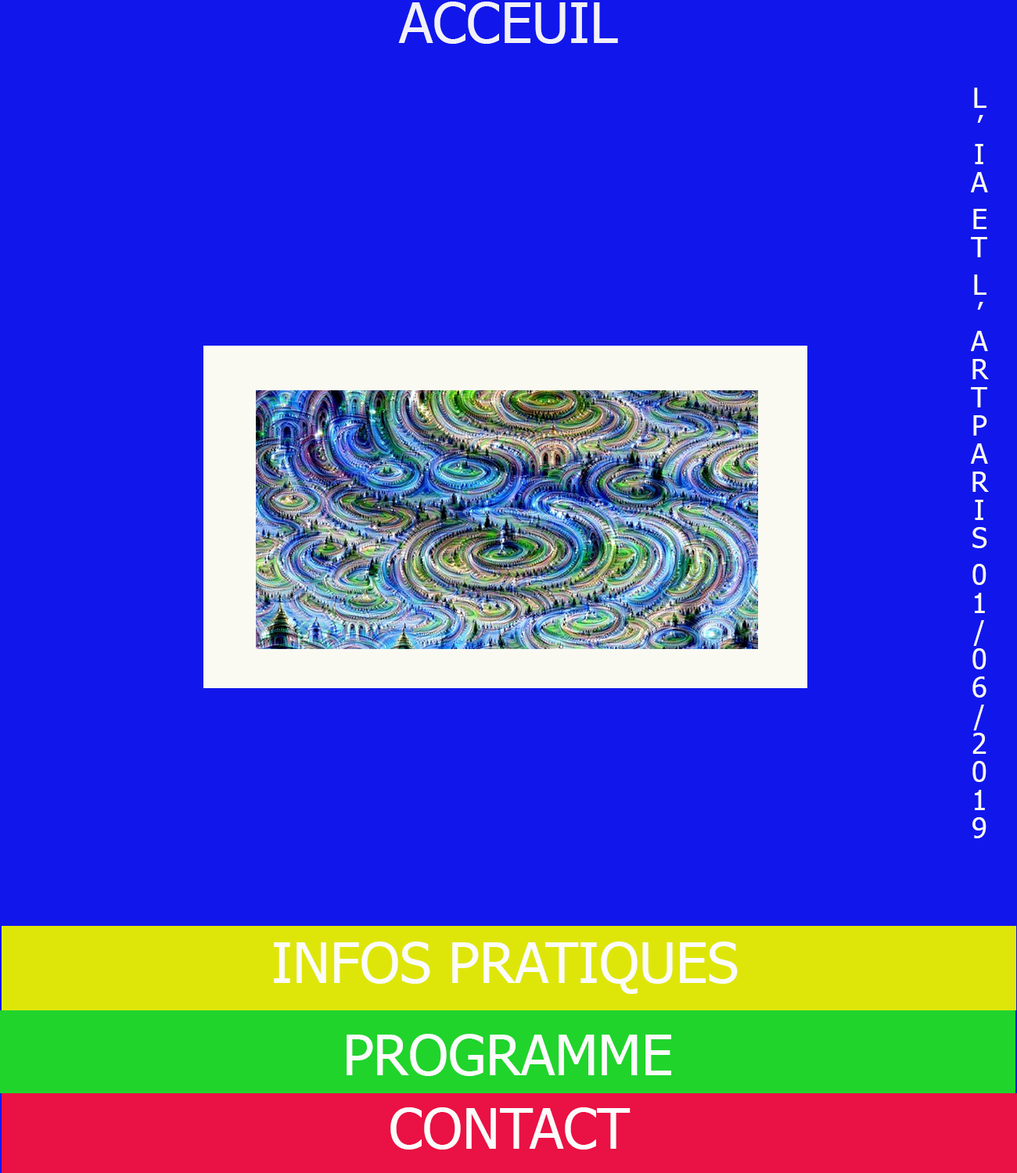
<style>
.page{position:relative;width:1017px;height:1173px;background:#1117ea}
.page>*{position:absolute;margin:0}
.t1{font:56.3px "Tahoma";color:#f1f1f7}
.t2{font:28.2px/9.4px "Tahoma";color:#fafaf3}
.t3{font:56.3px "Tahoma";color:#fbfbfb}
</style>
<div class="page">
<p class="t1" style="left:398px;top:2px;width:220px;height:42px">ACCEUIL</p>
<p class="t2" style="left:970px;top:88px;width:18px;height:750px;text-align:center">L’IA ET L’ARTPARIS 01/06/2019</p>
<p class="t3" style="left:274px;top:942px;width:463px;height:52px">INFOS PRATIQUES</p>
<p class="t3" style="left:346px;top:1034px;width:325px;height:42px">PROGRAMME</p>
<p class="t3" style="left:390px;top:1107px;width:240px;height:43px">CONTACT</p>
</div>
